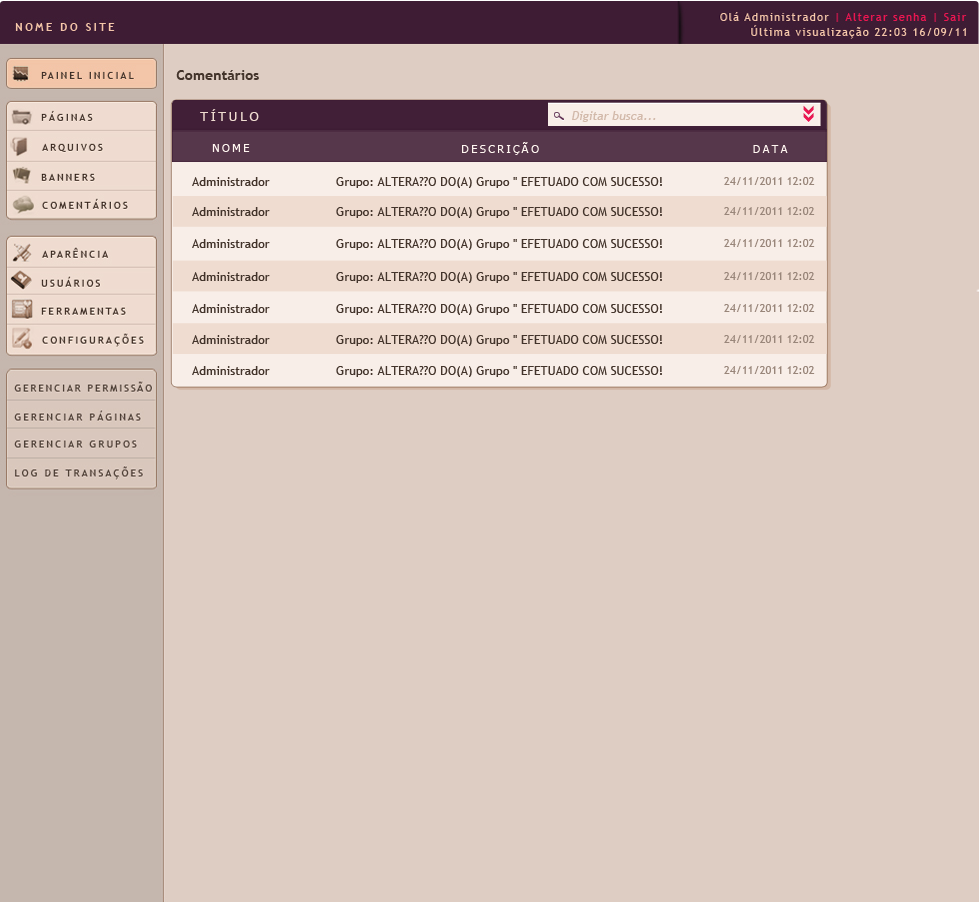
<style>
.page{position:relative;width:979px;height:902px;background:#decdc3}
.page>*{position:absolute;margin:0}
.t1{font:14.2px "TrebuchetMS-Bold";color:#43342b}
.t2{font:13.3px "Tahoma";letter-spacing:0.2em;color:#efdcd0;text-transform:uppercase}
.t3{font:12.3px "TrebuchetMS";color:#d2b9aa;font-style:italic}
.t4{font:11.3px "Tahoma";letter-spacing:0.2em;color:#fff6f0;text-transform:uppercase}
.t5{font:12.3px "TrebuchetMS";color:#43342b}
.t6{font:11.3px "TrebuchetMS";color:#99867a}
</style>
<div class="page">
<p class="t1" style="left:176px;top:70px;width:83px;height:10px">Comentários</p>
<p class="t2" style="left:200px;top:109px;width:59px;height:12px">título</p>
<p class="t3" style="left:572px;top:111px;width:84px;height:11px">Digitar busca...</p>
<p class="t4" style="left:212px;top:144px;width:38px;height:8px">nome</p>
<p class="t4" style="left:462px;top:142px;width:77px;height:13px">descrição</p>
<p class="t4" style="left:753px;top:145px;width:35px;height:8px">Data</p>
<p class="t5" style="left:192px;top:177px;width:78px;height:9px">Administrador</p>
<p class="t5" style="left:336px;top:177px;width:326px;height:11px">Grupo: ALTERA??O DO(A) Grupo '' EFETUADO COM SUCESSO!</p>
<p class="t6" style="left:724px;top:177px;width:91px;height:8px">24/11/2011 12:02</p>
<p class="t5" style="left:192px;top:207px;width:78px;height:9px">Administrador</p>
<p class="t5" style="left:336px;top:207px;width:326px;height:11px">Grupo: ALTERA??O DO(A) Grupo '' EFETUADO COM SUCESSO!</p>
<p class="t6" style="left:724px;top:207px;width:91px;height:8px">24/11/2011 12:02</p>
<p class="t5" style="left:192px;top:239px;width:78px;height:9px">Administrador</p>
<p class="t5" style="left:336px;top:239px;width:326px;height:11px">Grupo: ALTERA??O DO(A) Grupo '' EFETUADO COM SUCESSO!</p>
<p class="t6" style="left:724px;top:239px;width:91px;height:8px">24/11/2011 12:02</p>
<p class="t5" style="left:192px;top:272px;width:78px;height:9px">Administrador</p>
<p class="t5" style="left:336px;top:272px;width:326px;height:11px">Grupo: ALTERA??O DO(A) Grupo '' EFETUADO COM SUCESSO!</p>
<p class="t6" style="left:724px;top:272px;width:91px;height:8px">24/11/2011 12:02</p>
<p class="t5" style="left:192px;top:304px;width:78px;height:9px">Administrador</p>
<p class="t5" style="left:336px;top:304px;width:326px;height:11px">Grupo: ALTERA??O DO(A) Grupo '' EFETUADO COM SUCESSO!</p>
<p class="t6" style="left:724px;top:304px;width:91px;height:8px">24/11/2011 12:02</p>
<p class="t5" style="left:192px;top:335px;width:78px;height:9px">Administrador</p>
<p class="t5" style="left:336px;top:335px;width:326px;height:11px">Grupo: ALTERA??O DO(A) Grupo '' EFETUADO COM SUCESSO!</p>
<p class="t6" style="left:724px;top:335px;width:91px;height:8px">24/11/2011 12:02</p>
<p class="t5" style="left:192px;top:366px;width:78px;height:9px">Administrador</p>
<p class="t5" style="left:336px;top:366px;width:326px;height:11px">Grupo: ALTERA??O DO(A) Grupo '' EFETUADO COM SUCESSO!</p>
<p class="t6" style="left:724px;top:366px;width:91px;height:8px">24/11/2011 12:02</p>
</div>
